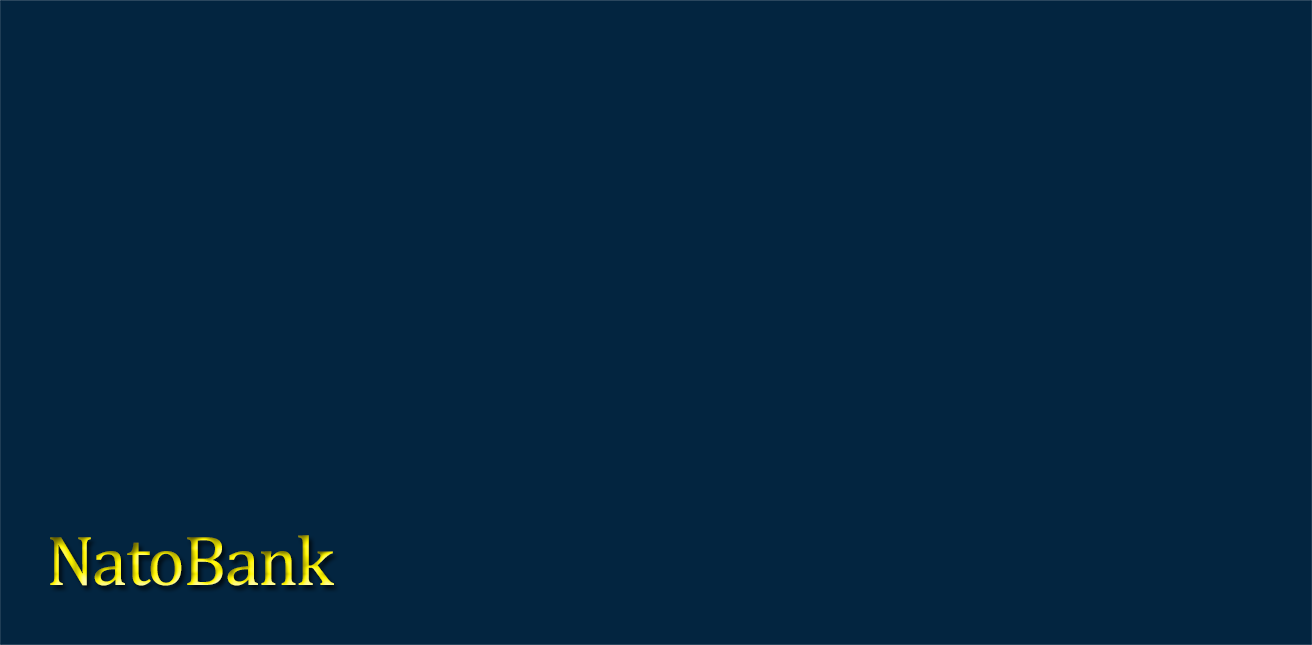
<style>
.page{position:relative;width:1312px;height:645px;background:#032540}
.page>*{position:absolute;margin:0}
.t1{font:71.4px "Cambria";letter-spacing:-0.025em}
</style>
<div class="page">
<p class="t1" style="left:50px;top:535px;width:284px;height:51px">NatoBank</p>
</div>
